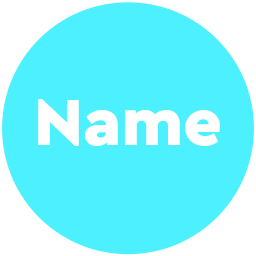
<style>
.page{position:relative;width:256px;height:256px;background:#4cf0ff}
.page>*{position:absolute;margin:0}
.t1{font:68.9px "CeraPro-Black";color:#ffffff}
</style>
<div class="page">
<p class="t1" style="left:38px;top:99px;width:182px;height:47px">Name</p>
</div>
